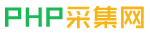
<style>
.page{position:relative;width:150px;height:35px;background:#ffffff}
.page>*{position:absolute;margin:0}
.t1{font:30px "ZHSRXT2.0--GBK1-0";color:#19b955}
.t2{font:27px "ZHSRXT2.0--GBK1-0";color:#f8b616}
</style>
<div class="page">
<p class="t1" style="left:5px;top:5px;width:139px;height:24px">PHP<span class="t2">采集网</span></p>
</div>
